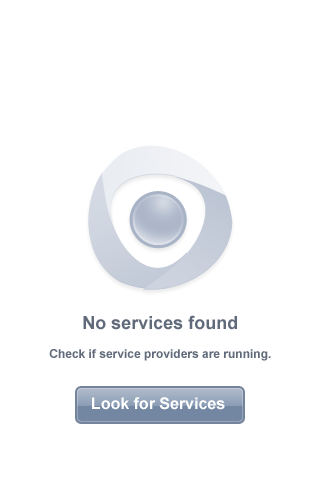
<style>
.page{position:relative;width:320px;height:480px;background:#ffffff}
.page>*{position:absolute;margin:0}
.t1{font:18px "Arial-BoldMT";color:#606a7a}
.t2{font:12px "Arial-BoldMT";color:#606a7a}
.t3{font:16px "Arial-BoldMT";color:#ffffff}
</style>
<div class="page">
<p class="t1" style="left:83px;top:315px;width:154px;height:15px">No services found</p>
<p class="t2" style="left:49px;top:349px;width:222px;height:12px">Check if service providers are running.</p>
<p class="t3" style="left:92px;top:397px;width:133px;height:13px">Look for Services</p>
</div>
